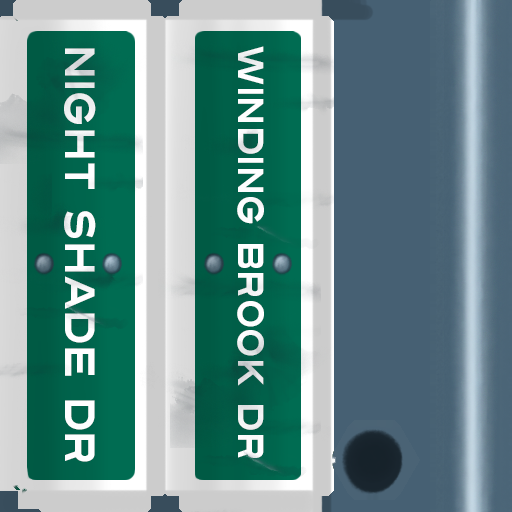
<style>
.page{position:relative;width:512px;height:512px}
.page>*{position:absolute;margin:0}
.t1{font:42px "Turnpike";color:#fefeff;scale:0.75 1}
.t2{font:36px "Turnpike";color:#fefeff;scale:0.75 1}
</style>
<div class="page">
<p class="t1" style="left:64px;top:48px;width:32px;height:414px;rotate:90deg">Night Shade Dr</p>
<p class="t2" style="left:237px;top:46px;width:27px;height:412px;rotate:90deg">Winding Brook Dr</p>
</div>
